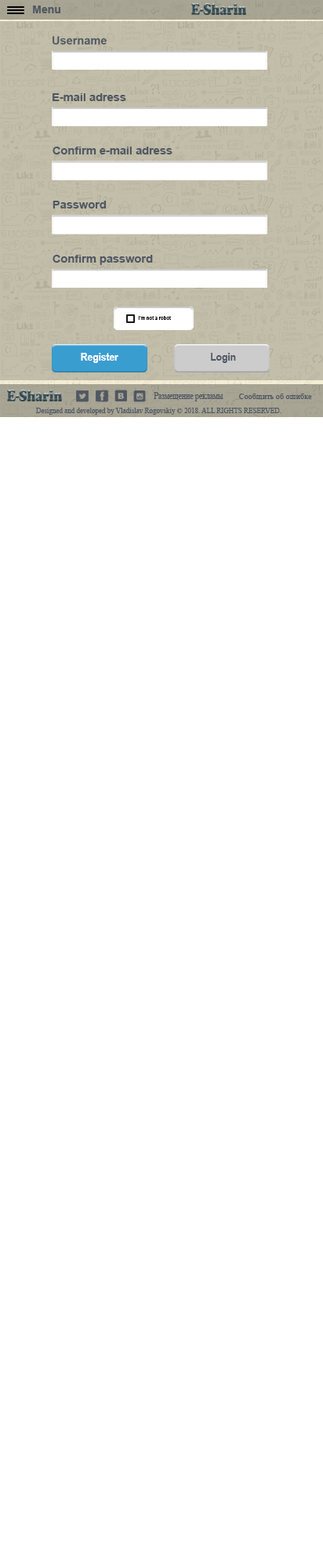
<style>
.page{position:relative;width:323px;height:1568px;background:#ffffff}
.page>*{position:absolute;margin:0}
.t1{font:11.1px "Arial-BoldMT";color:#505763}
.t2{font:5.6px "ArialNarrow-Bold";color:#000000}
.t3{font:11.1px "ArialNarrow-Bold";color:#ffffff}
.t4{font:11.1px "ArialNarrow-Bold";color:#505763}
.t5{font:10px "TimesNewRomanPSMT";color:#4c5563;scale:0.76 1}
.t6{font:8.2px "TimesNewRomanPSMT";color:#4c5563}
.t7{font:7.1px "TimesNewRomanPSMT";color:#4c5563}
</style>
<div class="page">
<p class="t1" style="left:53px;top:93px;width:73px;height:8px">E-mail adress</p>
<p class="t1" style="left:53px;top:147px;width:119px;height:7px">Confirm e-mail adress</p>
<p class="t1" style="left:53px;top:201px;width:54px;height:8px">Password</p>
<p class="t1" style="left:53px;top:255px;width:100px;height:10px">Confirm password</p>
<p class="t2" style="left:138px;top:316px;width:33px;height:4px">I’m not a robot</p>
<p class="t3" style="left:81px;top:353px;width:37px;height:10px">Register</p>
<p class="t4" style="left:211px;top:353px;width:25px;height:10px">Login</p>
<p class="t5" style="left:154px;top:392px;width:69px;height:9px">Размещение рекламы</p>
<p class="t6" style="left:239px;top:394px;width:73px;height:6px">Сообщить об ошибке</p>
<p class="t7" style="left:36px;top:408px;width:245px;height:7px">Designed and developed by Vladislav Rogovskiy © 2018. ALL RIGHTS RESERVED.</p>
</div>
